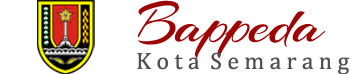
<style>
.page{position:relative;width:360px;height:74px;background:#ffffff}
.page>*{position:absolute;margin:0}
.t1{font:60px "Arizonia-Regular";color:#9d0505}
.t2{font:24px "Cambria";color:#515151}
</style>
<div class="page">
<p class="t1" style="left:137px;top:0px;width:189px;height:59px">Bappeda</p>
<p class="t2" style="left:137px;top:52px;width:213px;height:23px">K o t a  S e m a r a n g</p>
</div>
